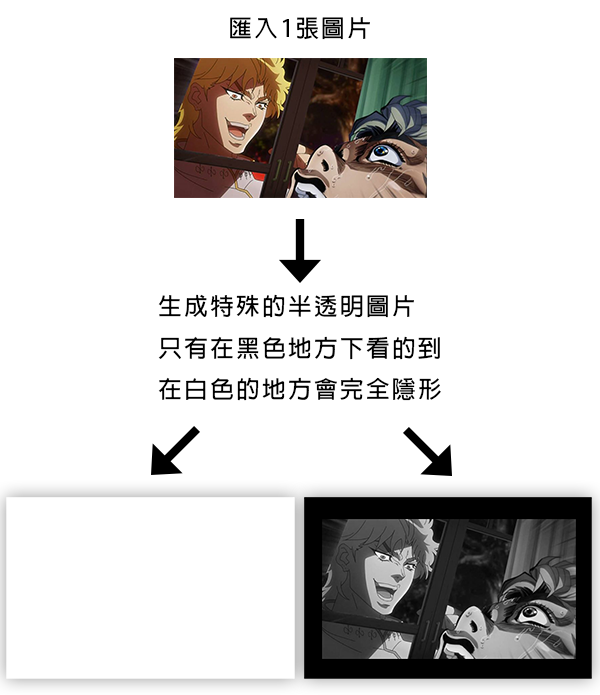
<style>
.page{position:relative;width:600px;height:695px;background:#ffffff}
.page>*{position:absolute;margin:0}
.t1{font:23.6px "AdobeFanHeitiStd-Bold";letter-spacing:0.1em;color:#000000}
</style>
<div class="page">
<p class="t1" style="left:230px;top:17px;width:140px;height:23px">匯入1張圖片</p>
<p class="t1" style="left:158px;top:294px;width:283px;height:107px">生成特殊的半透明圖片<br>只有在黑色地方下看的到<br>在白色的地方會完全隱形</p>
</div>
